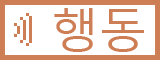
<style>
.page{position:relative;width:160px;height:60px;background:#ffffff}
.page>*{position:absolute;margin:0}
.t1{font:48px "MalgunGothicRegular";color:#cd7e55}
</style>
<div class="page">
<p class="t1" style="left:54px;top:8px;width:90px;height:44px">행동</p>
</div>
